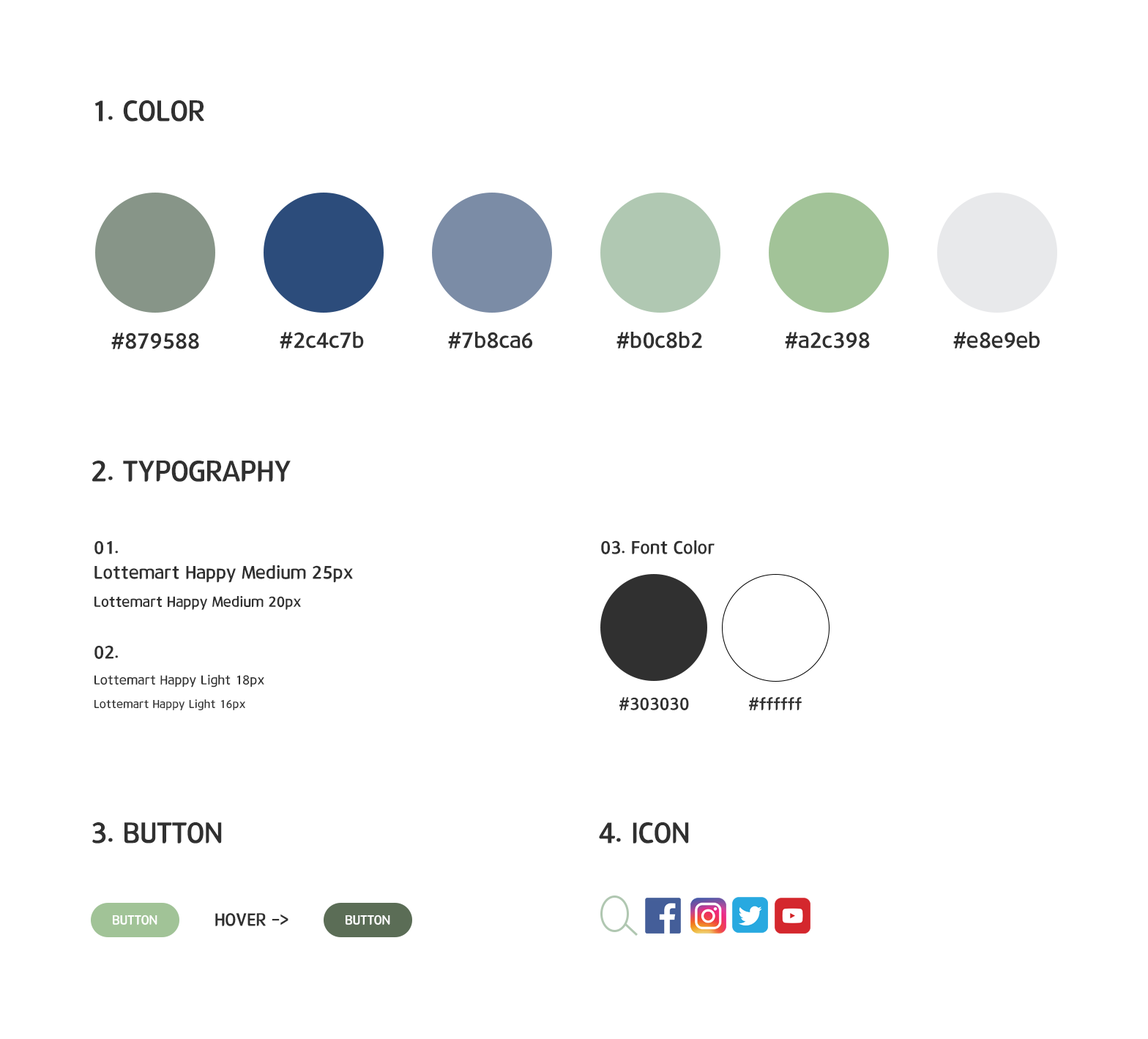
<style>
.page{position:relative;width:1148px;height:1039px;background:#ffffff}
.page>*{position:absolute;margin:0}
.t1{font:29.3px "12LotteMartHappyMedium";color:#303030}
.t2{font:22px "12LotteMartHappyMedium";color:#303030}
.t3{font:18.3px "12LotteMartHappyMedium";color:#303030}
.t4{font:14.6px "12LotteMartHappyMedium";color:#303030}
.t5{font:13.2px "12LotteMartHLight";color:#303030}
.t6{font:11.7px "12LotteMartHLight";color:#303030}
.t7{font:17.5px "12LotteMartHappyMedium";color:#303030}
.t8{font:13.2px "12LotteMartHappyMedium";color:#ffffff}
.t9{font:17.9px "12LotteMartHappyMedium";color:#303030}
</style>
<div class="page">
<p class="t1" style="left:95px;top:100px;width:109px;height:22px">1. COLOR</p>
<p class="t2" style="left:111px;top:332px;width:88px;height:17px">#879588</p>
<p class="t2" style="left:280px;top:332px;width:84px;height:16px">#2c4c7b</p>
<p class="t2" style="left:448px;top:332px;width:84px;height:16px">#7b8ca6</p>
<p class="t2" style="left:616px;top:332px;width:86px;height:16px">#b0c8b2</p>
<p class="t2" style="left:785px;top:332px;width:85px;height:16px">#a2c398</p>
<p class="t2" style="left:953px;top:332px;width:87px;height:16px">#e8e9eb</p>
<p class="t1" style="left:92px;top:460px;width:199px;height:22px">2. TYPOGRAPHY</p>
<p class="t3" style="left:94px;top:540px;width:24px;height:14px">01.</p>
<p class="t3" style="left:601px;top:540px;width:114px;height:14px">03. Font Color</p>
<p class="t3" style="left:94px;top:564px;width:259px;height:19px">Lottemart Happy Medium 25px</p>
<p class="t4" style="left:94px;top:595px;width:207px;height:15px">Lottemart Happy Medium 20px</p>
<p class="t3" style="left:94px;top:645px;width:24px;height:14px">02.</p>
<p class="t5" style="left:94px;top:674px;width:170px;height:13px">Lottemart Happy Light 18px</p>
<p class="t6" style="left:94px;top:699px;width:151px;height:11px">Lottemart Happy Light 16px</p>
<p class="t7" style="left:619px;top:697px;width:70px;height:13px">#303030</p>
<p class="t7" style="left:749px;top:697px;width:53px;height:13px">#ffffff</p>
<p class="t1" style="left:92px;top:822px;width:130px;height:21px">3. BUTTON</p>
<p class="t1" style="left:599px;top:822px;width:90px;height:21px">4. ICON</p>
<p class="t8" style="left:113px;top:914px;width:44px;height:11px">BUTTON</p>
<p class="t9" style="left:215px;top:913px;width:73px;height:13px">HOVER -&gt;</p>
<p class="t8" style="left:346px;top:914px;width:44px;height:11px">BUTTON</p>
</div>
